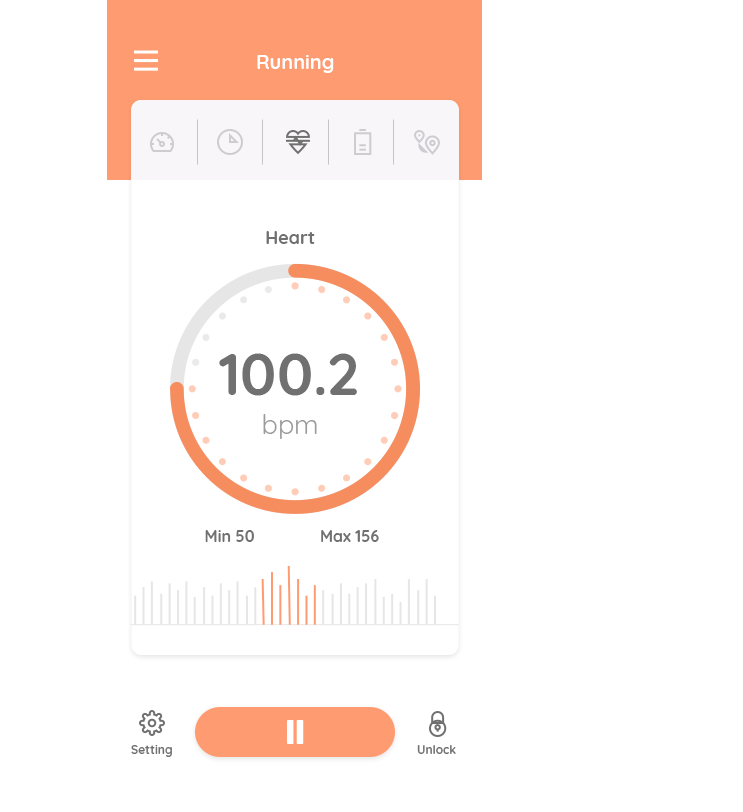
<style>
.page{position:relative;width:743px;height:812px;background:#ffffff}
.page>*{position:absolute;margin:0}
.t1{font:20px "Quicksand-Bold";color:#ffffff}
.t2{font:18px "Quicksand-Bold";color:#707070}
.t3{font:59px "Quicksand-Bold";color:#707070}
.t4{font:27px "Quicksand-Regular";color:#9b9b9b}
.t5{font:16px "Quicksand-Bold";color:#707070}
.t6{font:12px "Quicksand-Bold";color:#707070}
</style>
<div class="page">
<p class="t1" style="left:257px;top:55px;width:77px;height:18px">Running</p>
<p class="t2" style="left:266px;top:231px;width:49px;height:13px">Heart</p>
<p class="t3" style="left:219px;top:353px;width:138px;height:43px">100.2</p>
<p class="t4" style="left:263px;top:414px;width:54px;height:25px">bpm</p>
<p class="t5" style="left:205px;top:530px;width:49px;height:12px">Min 50</p>
<p class="t5" style="left:321px;top:530px;width:58px;height:12px">Max 156</p>
<p class="t6" style="left:131px;top:745px;width:41px;height:12px">Setting</p>
<p class="t6" style="left:417px;top:745px;width:39px;height:9px">Unlock</p>
</div>
